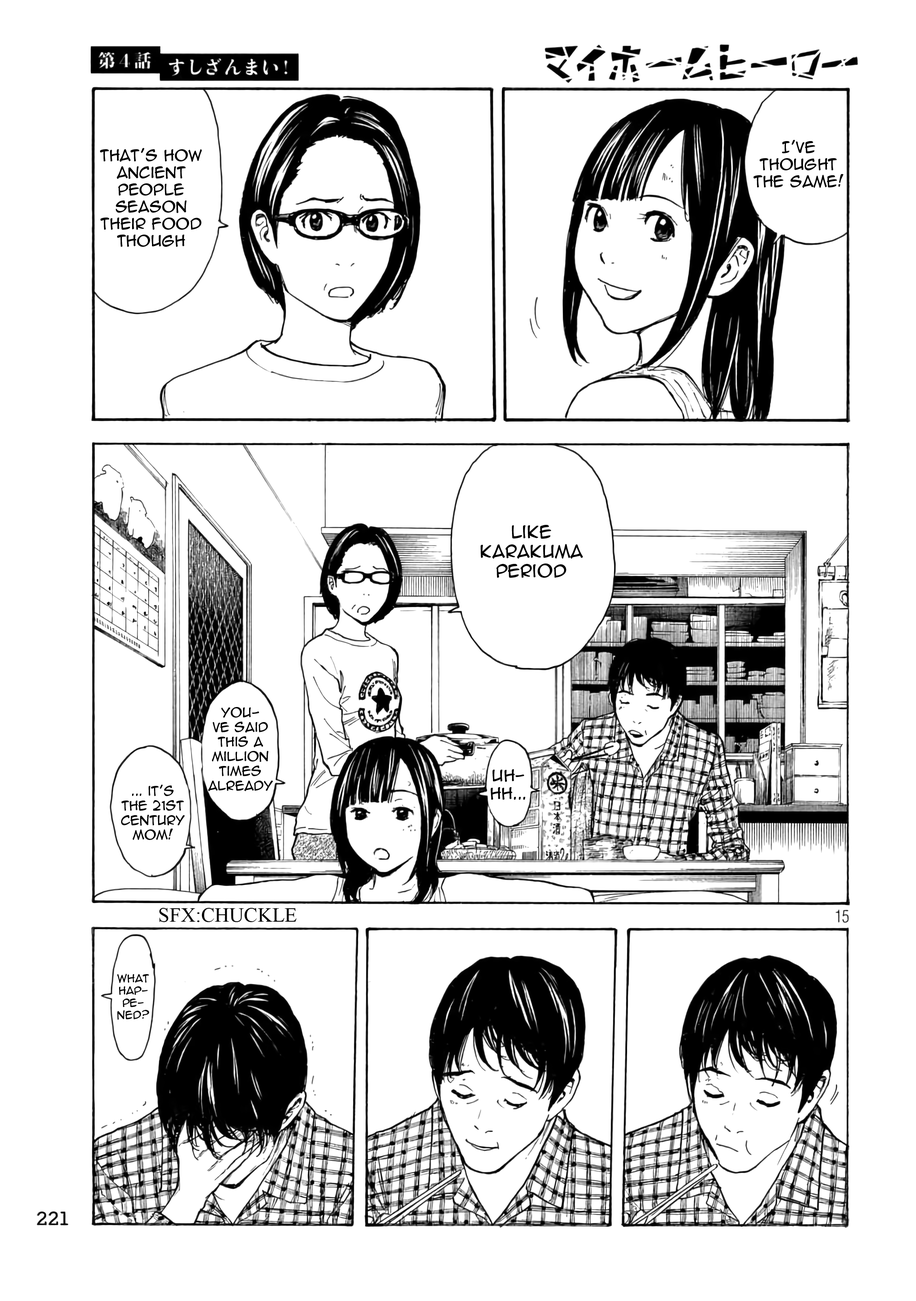
<style>
.page{position:relative;width:916px;height:1301px;background:#ffffff}
.page>*{position:absolute;margin:0}
.t1{font:14.2px "AnimeAce2.0BB";color:#000000}
.t2{font:16.3px "AnimeAce2.0BB";color:#000000}
.t3{font:12.2px "AnimeAce2.0BB";color:#000000}
.t4{font:15px "AnimeAce2.0BB";color:#000000}
.t5{font:20.3px "TimesNewRomanPSMT";color:#000000;text-transform:uppercase}
.t6{font:10.2px "AnimeAce2.0BB";color:#000000}
</style>
<div class="page">
<p class="t1" style="left:100px;top:148px;width:102px;height:99px;text-align:center">That’s how ancient people season their food though</p>
<p class="t1" style="left:754px;top:140px;width:90px;height:48px;text-align:center">I’ve thought the same!</p>
<p class="t2" style="left:481px;top:525px;width:102px;height:53px;text-align:center">Like Karakuma period</p>
<p class="t3" style="left:208px;top:707px;width:65px;height:84px;text-align:center">You-<br>ve said this a million times already</p>
<p class="t4" style="left:491px;top:769px;width:35px;height:31px;text-align:center">uh-<br>hh...</p>
<p class="t3" style="left:121px;top:785px;width:64px;height:55px;text-align:center">... it’s the 21st century mom!</p>
<p class="t5" style="left:159px;top:908px;width:138px;height:14px">sfx:chuckle</p>
<p class="t6" style="left:117px;top:974px;width:32px;height:46px;text-align:center">What hap-<br>pe-<br>ned?</p>
</div>
